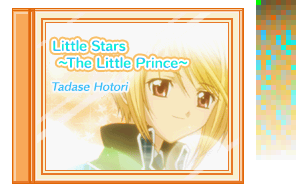
<style>
.page{position:relative;width:296px;height:192px}
.page>*{position:absolute;margin:0}
.t1{font:12px "HummingStd-B";letter-spacing:0.02em}
.t2{font:12px "HummingStd-B";letter-spacing:0.02em;scale:0.8 1}
.t3{font:10px "HummingStd-D";letter-spacing:0.02em;color:#38c0f8;font-style:italic}
</style>
<div class="page">
<p class="t1" style="left:53px;top:40px;width:73px;height:12px">Little Stars</p>
<p class="t1" style="left:58px;top:57px;width:130px;height:12px"><span class="t2">～</span>The Little Prince<span class="t2">～</span></p>
<p class="t3" style="left:52px;top:81px;width:77px;height:10px">Tadase Hotori</p>
</div>
